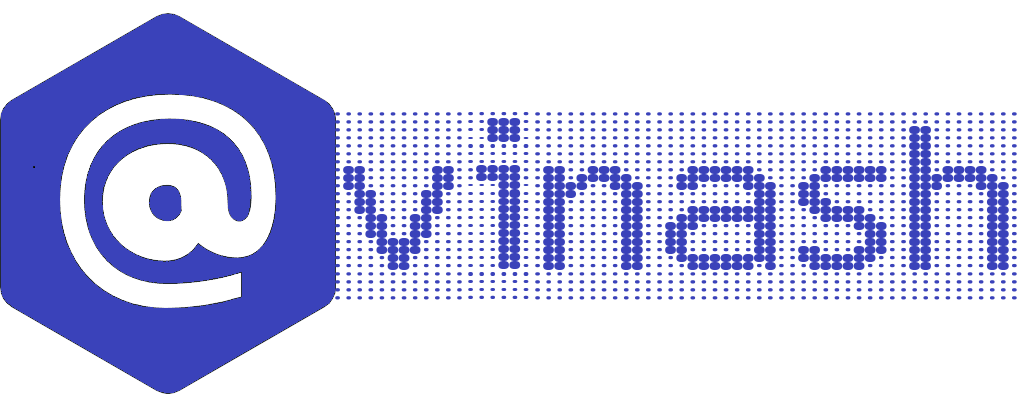
<style>
.page{position:relative;width:1020px;height:412px;background:#ffffff}
.page>*{position:absolute;margin:0}
.t1{font:185px "24LEDGrid";color:#3a42ba;scale:1.39 1}
</style>
<div class="page">
<p class="t1" style="left:335px;top:112px;width:682px;height:188px">vinash</p>
</div>
